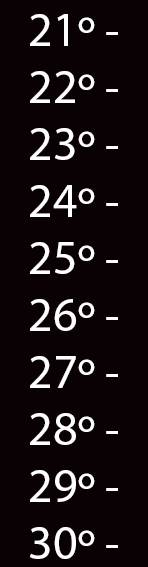
<style>
.page{position:relative;width:148px;height:567px;background:#0a0104}
.page>*{position:absolute;margin:0}
.t1{font:48px "MyriadPro-Regular";color:#ffffff}
</style>
<div class="page">
<p class="t1" style="left:30px;top:14px;width:88px;height:32px">21º -</p>
<p class="t1" style="left:30px;top:71px;width:88px;height:32px">22º -</p>
<p class="t1" style="left:30px;top:128px;width:88px;height:32px">23º -</p>
<p class="t1" style="left:30px;top:185px;width:88px;height:32px">24º -</p>
<p class="t1" style="left:30px;top:242px;width:88px;height:32px">25º -</p>
<p class="t1" style="left:30px;top:299px;width:88px;height:32px">26º -</p>
<p class="t1" style="left:30px;top:356px;width:88px;height:32px">27º -</p>
<p class="t1" style="left:30px;top:413px;width:88px;height:32px">28º -</p>
<p class="t1" style="left:30px;top:470px;width:88px;height:32px">29º -</p>
<p class="t1" style="left:30px;top:527px;width:88px;height:32px">30º -</p>
</div>
